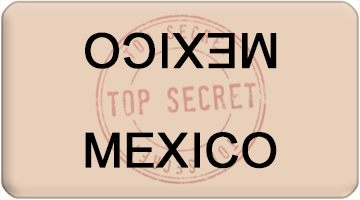
<style>
.page{position:relative;width:360px;height:200px;background:#e8d0bb}
.page>*{position:absolute;margin:0}
.t1{font:48px "ArialMT";color:#000000;font-weight:bold}
</style>
<div class="page">
<p class="t1" style="left:85px;top:32px;width:192px;height:37px;rotate:180deg">MEXICO</p>
<p class="t1" style="left:85px;top:132px;width:192px;height:37px">MEXICO</p>
</div>
